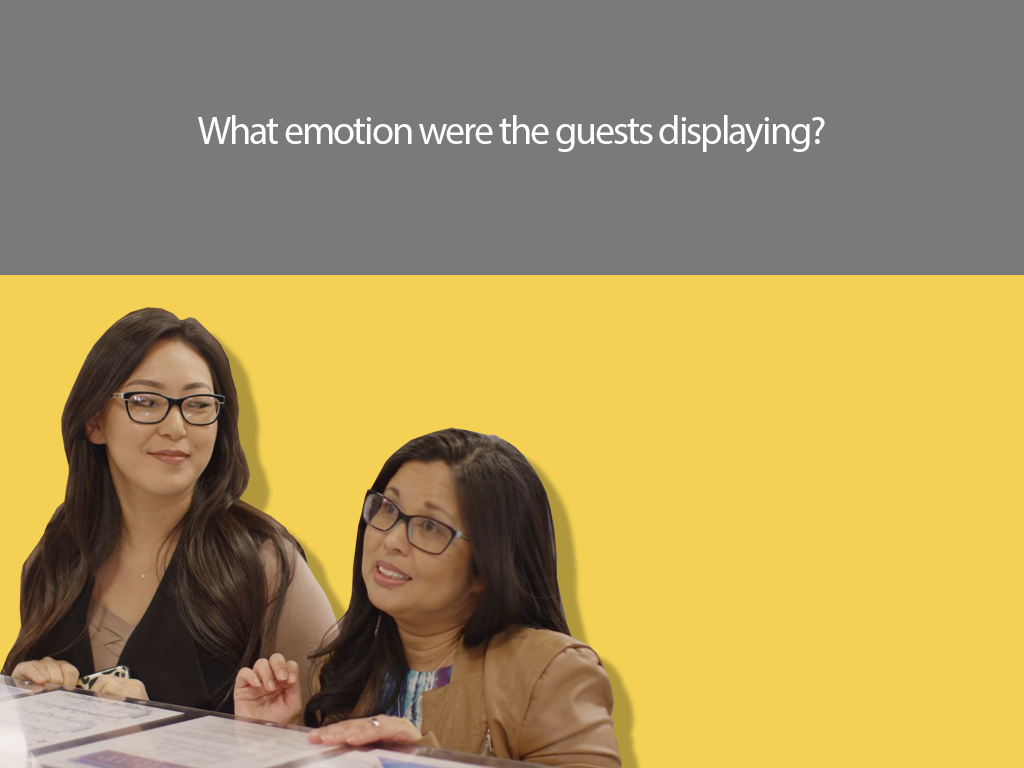
<style>
.page{position:relative;width:1024px;height:768px;background:#f4d154}
.page>*{position:absolute;margin:0}
.t1{font:40px "MyriadPro-Regular";letter-spacing:-0.05em;color:#ffffff}
</style>
<div class="page">
<p class="t1" style="left:198px;top:115px;width:627px;height:38px">What emotion were the guests displaying?</p>
</div>
